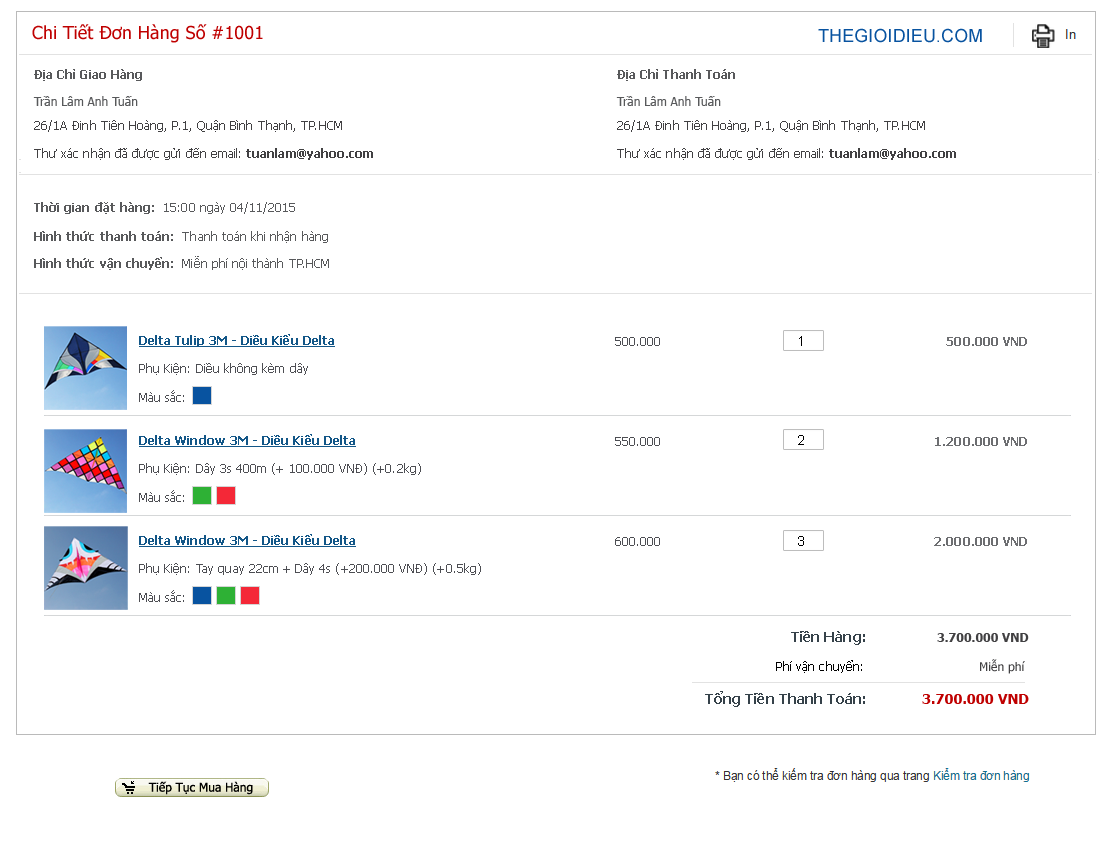
<style>
.page{position:relative;width:1110px;height:861px;background:#ffffff}
.page>*{position:absolute;margin:0}
.t1{font:18px "Tahoma";letter-spacing:0.005em;color:#bf0000}
.t2{font:18px "ArialMT";letter-spacing:0.005em;color:#0853a0}
.t3{font:12px "Tahoma-Bold";letter-spacing:0.005em;color:#58595b}
.t4{font:12px "Tahoma";letter-spacing:0.005em;color:#58595b}
.t5{font:12px "Tahoma";letter-spacing:0.005em;color:#414042}
.t6{font:12px "Tahoma-Bold";letter-spacing:0.005em;color:#414042}
.t7{font:12px "Tahoma-Bold";letter-spacing:0.005em;color:#125687;text-decoration:underline}
.t8{font:12px "Tahoma";letter-spacing:0.005em;color:#4d4e53}
.t9{font:14px "ArialMT";letter-spacing:0.005em;color:#000000}
.t10{font:12px "Tahoma-Bold";letter-spacing:0.005em;color:#6d6e71}
.t11{font:14px "Tahoma-Bold";letter-spacing:0.005em;color:#36424a}
.t12{font:12px "Tahoma";letter-spacing:0.005em;color:#000000}
.t13{font:14px "Tahoma-Bold";letter-spacing:0.005em;color:#bf0000}
</style>
<div class="page">
<p class="t1" style="left:32px;top:24px;width:231px;height:19px">Chi Tiết Đơn Hàng Số #1001</p>
<p class="t2" style="left:818px;top:28px;width:164px;height:15px">THEGIOIDIEU.COM</p>
<p class="t3" style="left:34px;top:69px;width:108px;height:12px">Địa Chỉ Giao Hàng</p>
<p class="t3" style="left:617px;top:69px;width:118px;height:12px">Địa Chỉ Thanh Toán</p>
<p class="t4" style="left:33px;top:96px;width:105px;height:10px">Trần Lâm Anh Tuấn</p>
<p class="t4" style="left:616px;top:96px;width:105px;height:10px">Trần Lâm Anh Tuấn</p>
<p class="t5" style="left:34px;top:120px;width:308px;height:12px">26/1A Đinh Tiên Hoàng, P.1, Quận Bình Thạnh, TP.HCM</p>
<p class="t5" style="left:617px;top:120px;width:308px;height:12px">26/1A Đinh Tiên Hoàng, P.1, Quận Bình Thạnh, TP.HCM</p>
<p class="t5" style="left:34px;top:148px;width:339px;height:12px">Thư xác nhận đã được gửi đến email: <span class="t6">tuanlam@yahoo.com</span></p>
<p class="t5" style="left:617px;top:148px;width:339px;height:12px">Thư xác nhận đã được gửi đến email: <span class="t6">tuanlam@yahoo.com</span></p>
<p class="t4" style="left:34px;top:202px;width:261px;height:12px"><span class="t3">Thời gian đặt hàng:  </span>15:00 ngày 04/11/2015</p>
<p class="t4" style="left:34px;top:231px;width:294px;height:12px"><span class="t3">Hình thức thanh toán:</span>  Thanh toán khi nhận hàng</p>
<p class="t4" style="left:34px;top:256px;width:295px;height:14px"><span class="t3">Hình thức vận chuyển:</span>  Miễn phí nội thành TP.HCM</p>
<p class="t7" style="left:139px;top:334px;width:196px;height:13px">Delta Tulip 3M - Diều Kiểu Delta</p>
<p class="t8" style="left:615px;top:337px;width:45px;height:9px">500.000</p>
<p class="t9" style="left:799px;top:336px;width:3px;height:10px">1</p>
<p class="t10" style="left:946px;top:337px;width:81px;height:9px">500.000 VND</p>
<p class="t8" style="left:139px;top:363px;width:169px;height:12px">Phụ Kiện: Diều không kèm dây</p>
<p class="t8" style="left:139px;top:390px;width:45px;height:12px">Màu sắc:</p>
<p class="t7" style="left:139px;top:434px;width:217px;height:13px">Delta Window 3M - Diều Kiểu Delta</p>
<p class="t8" style="left:615px;top:437px;width:45px;height:9px">550.000</p>
<p class="t9" style="left:798px;top:435px;width:6px;height:10px">2</p>
<p class="t10" style="left:935px;top:437px;width:92px;height:9px">1.200.000 VND</p>
<p class="t8" style="left:139px;top:463px;width:282px;height:12px">Phụ Kiện: Dây 3s 400m (+ 100.000 VNĐ) (+0.2kg)</p>
<p class="t8" style="left:139px;top:490px;width:45px;height:12px">Màu sắc:</p>
<p class="t7" style="left:139px;top:534px;width:217px;height:13px">Delta Window 3M - Diều Kiểu Delta</p>
<p class="t8" style="left:615px;top:537px;width:45px;height:9px">600.000</p>
<p class="t9" style="left:798px;top:536px;width:6px;height:10px">3</p>
<p class="t10" style="left:934px;top:537px;width:93px;height:9px">2.000.000 VND</p>
<p class="t8" style="left:139px;top:563px;width:342px;height:12px">Phụ Kiện: Tay quay 22cm + Dây 4s (+200.000 VNĐ) (+0.5kg)</p>
<p class="t8" style="left:139px;top:590px;width:45px;height:12px">Màu sắc:</p>
<p class="t11" style="left:791px;top:631px;width:74px;height:14px">Tiền Hàng:</p>
<p class="t6" style="left:937px;top:633px;width:92px;height:9px">3.700.000 VND</p>
<p class="t12" style="left:776px;top:660px;width:86px;height:13px">Phí vận chuyển:</p>
<p class="t5" style="left:980px;top:659px;width:45px;height:15px">Miễn phí</p>
<p class="t11" style="left:705px;top:691px;width:160px;height:16px">Tổng Tiền Thanh Toán:</p>
<p class="t13" style="left:922px;top:694px;width:107px;height:10px">3.700.000 VND</p>
</div>
